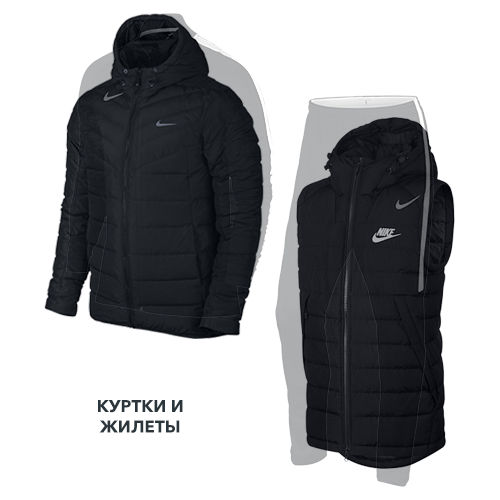
<style>
.page{position:relative;width:500px;height:500px;background:#ffffff}
.page>*{position:absolute;margin:0}
.t1{font:17px "AvenirNextW1G-Bold";color:#2a363b;text-transform:uppercase}
</style>
<div class="page">
<p class="t1" style="left:98px;top:400px;width:85px;height:33px;text-align:center">Куртки и<br>Жилеты</p>
</div>
